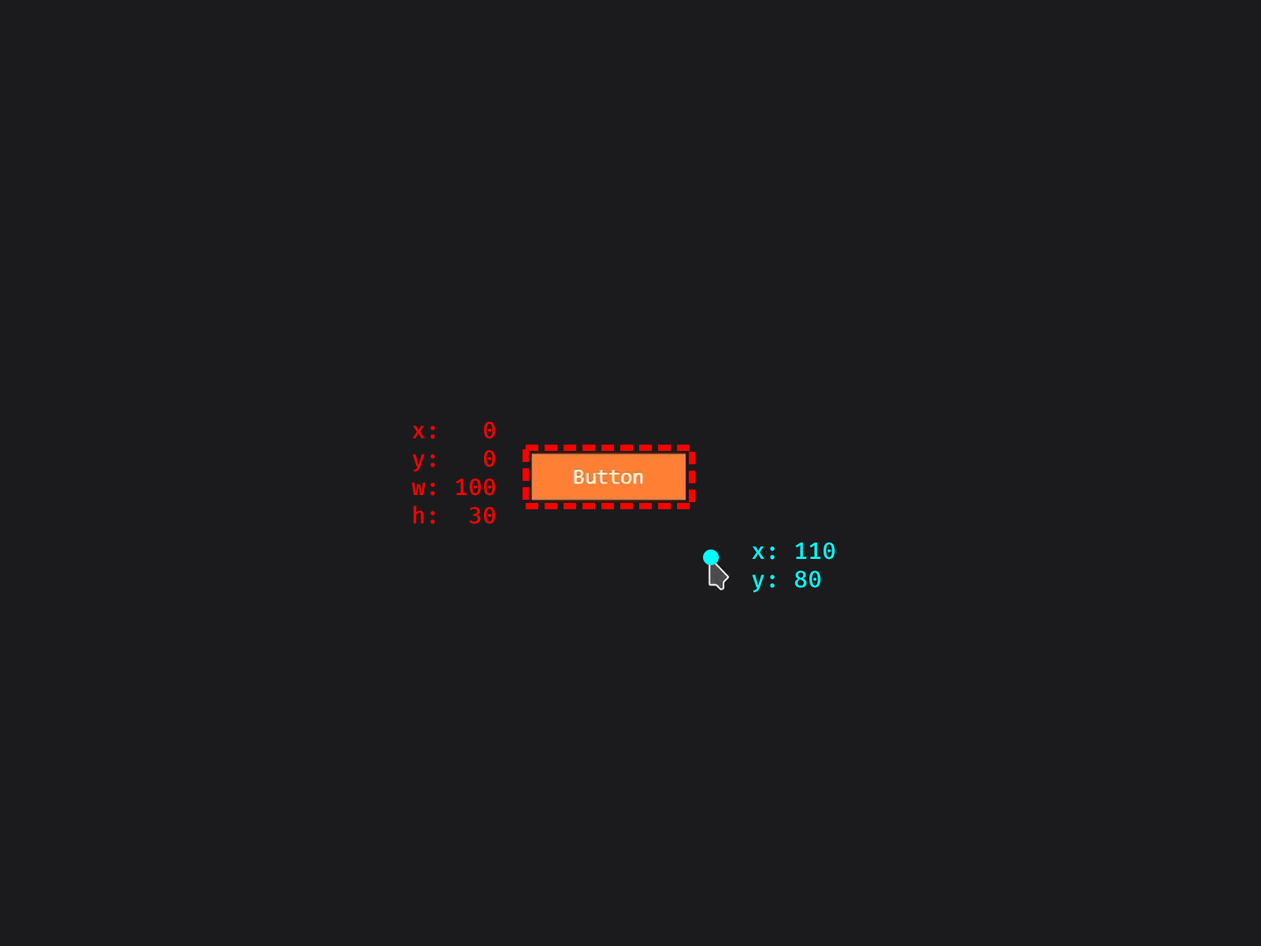
<style>
.page{position:relative;width:1261px;height:946px;background:#1b1b1d}
.page>*{position:absolute;margin:0}
.t1{font:23.6px "FiraMono-Medium";color:#ff0000}
.t2{font:23.6px "FiraMono-Medium";color:#00ffff}
</style>
<div class="page">
<p class="t1" style="left:411px;top:421px;width:85px;height:103px;text-align:right">x:   0<br>y:   0<br>w: 100<br>h:  30</p>
<p class="t2" style="left:752px;top:541px;width:83px;height:52px">x: 110<br>y: 80</p>
</div>
